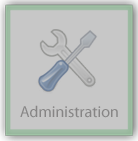
<style>
.page{position:relative;width:138px;height:141px;background:#c7c7c7}
.page>*{position:absolute;margin:0}
.t1{font:15.9px "MyriadPro-Regular";color:#868585}
</style>
<div class="page">
<p class="t1" style="left:20px;top:105px;width:98px;height:13px">Administration</p>
</div>
